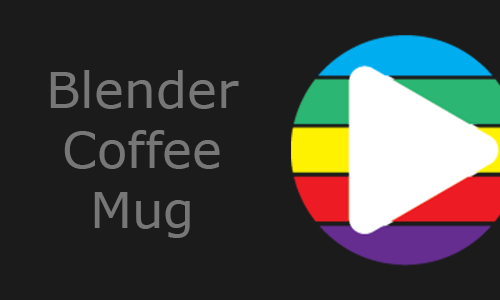
<style>
.page{position:relative;width:500px;height:300px;background:#1b1b1b}
.page>*{position:absolute;margin:0}
.t1{font:50px "Verdana";color:#777777}
</style>
<div class="page">
<p class="t1" style="left:50px;top:70px;width:189px;height:168px;text-align:center">Blender<br>Coffee<br>Mug</p>
</div>
